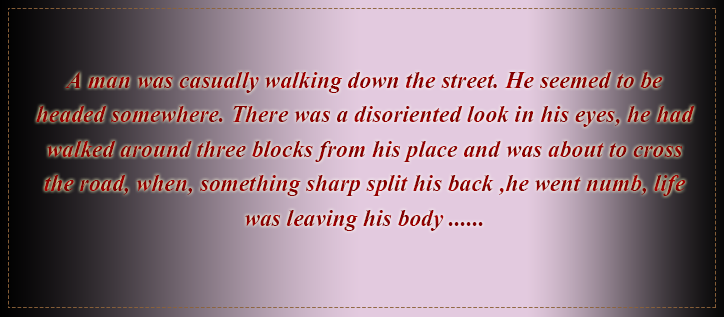
<style>
.page{position:relative;width:724px;height:317px}
.page>*{position:absolute;margin:0}
.t1{font:28.8px "Vijaya-Bold";letter-spacing:0.005em;color:#8e0000}
</style>
<div class="page">
<p class="t1" style="left:36px;top:72px;width:659px;height:159px;text-align:center">A man was casually walking down the street. He seemed to be headed somewhere. There was a disoriented look in his eyes, he had <br>walked around three blocks from his place and was about to cross the road, when, something sharp split his back ,he went numb, life was leaving his body ......</p>
</div>
